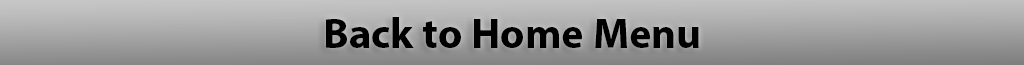
<style>
.page{position:relative;width:1024px;height:65px}
.page>*{position:absolute;margin:0}
.t1{font:42.7px "MyriadPro-Bold";color:#000000}
</style>
<div class="page">
<p class="t1" style="left:326px;top:17px;width:373px;height:31px">Back to Home Menu</p>
</div>
